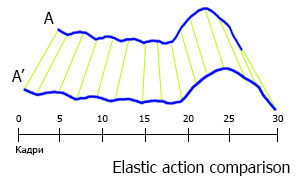
<style>
.page{position:relative;width:300px;height:185px;background:#ffffff}
.page>*{position:absolute;margin:0}
.t1{font:16px "Tahoma";color:#000000}
.t2{font:10px "Tahoma";color:#000000}
</style>
<div class="page">
<p class="t1" style="left:43px;top:12px;width:11px;height:12px">A</p>
<p class="t1" style="left:11px;top:69px;width:14px;height:13px">A’</p>
<p class="t2" style="left:16px;top:115px;width:6px;height:7px">0</p>
<p class="t2" style="left:57px;top:115px;width:5px;height:7px">5</p>
<p class="t2" style="left:98px;top:115px;width:10px;height:7px">10</p>
<p class="t2" style="left:140px;top:115px;width:10px;height:7px">15</p>
<p class="t2" style="left:183px;top:115px;width:11px;height:7px">20</p>
<p class="t2" style="left:223px;top:115px;width:11px;height:7px">25</p>
<p class="t2" style="left:272px;top:115px;width:12px;height:7px">30</p>
<p class="t2" style="left:16px;top:146px;width:28px;height:9px">Кадри</p>
<p class="t1" style="left:113px;top:160px;width:177px;height:16px">Elastic action comparison</p>
</div>
